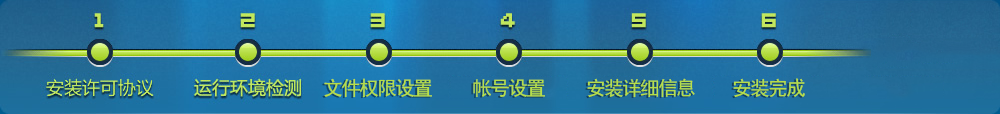
<style>
.page{position:relative;width:1000px;height:114px}
.page>*{position:absolute;margin:0}
.t1{font:20px "SimHei";letter-spacing:-0.1em;color:#b6de49}
</style>
<div class="page">
<p class="t1" style="left:324px;top:78px;width:108px;height:20px">文件权限设置</p>
<p class="t1" style="left:587px;top:78px;width:108px;height:20px">安装详细信息</p>
<p class="t1" style="left:733px;top:78px;width:72px;height:20px">安装完成</p>
<p class="t1" style="left:473px;top:79px;width:72px;height:18px">帐号设置</p>
</div>
